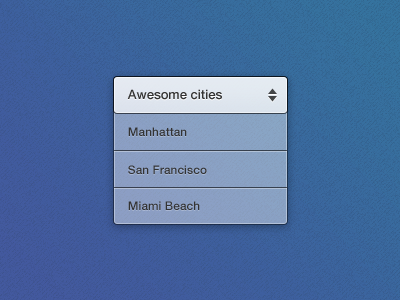
<style>
.page{position:relative;width:400px;height:300px}
.page>*{position:absolute;margin:0}
.t1{font:13px "HelveticaNeue-Medium";color:#333333}
.t2{font:12px "HelveticaNeue-Medium";color:#333333}
</style>
<div class="page">
<p class="t1" style="left:127px;top:89px;width:95px;height:11px">Awesome cities</p>
<p class="t2" style="left:128px;top:127px;width:59px;height:9px">Manhattan</p>
<p class="t2" style="left:128px;top:165px;width:79px;height:9px">San Francisco</p>
<p class="t2" style="left:128px;top:201px;width:72px;height:9px">Miami Beach</p>
</div>
